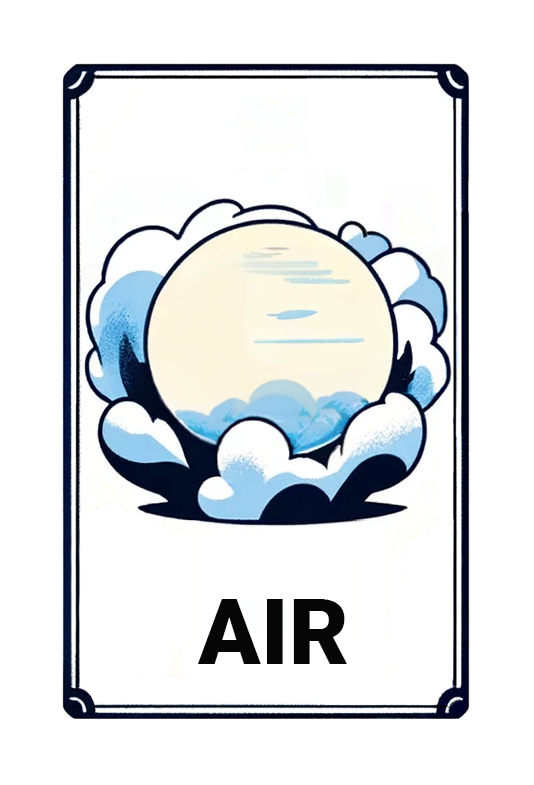
<style>
.page{position:relative;width:534px;height:785px;background:#ffffff}
.page>*{position:absolute;margin:0}
.t1{font:92px "Roboto-Black";color:#060606}
</style>
<div class="page">
<p class="t1" style="left:197px;top:599px;width:150px;height:65px">AIR</p>
</div>
